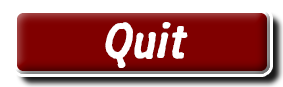
<style>
.page{position:relative;width:283px;height:87px;background:#ffffff}
.page>*{position:absolute;margin:0}
.t1{font:49px "SegoeMarker";color:#ffffff;font-weight:bold;font-style:italic}
</style>
<div class="page">
<p class="t1" style="left:105px;top:22px;width:83px;height:46px">Quit</p>
</div>
